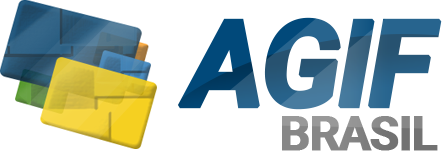
<style>
.page{position:relative;width:442px;height:151px;background:#ffffff}
.page>*{position:absolute;margin:0}
.t1{font:48.1px/44.2px "Roboto-Bold";letter-spacing:-0.05em;font-weight:bold}
.t2{font:119.8px/69.5px "Roboto-BoldItalic";letter-spacing:-0.05em;font-weight:bold}
</style>
<div class="page">
<p class="t1" style="left:177px;top:17px;width:265px;height:134px;text-align:center"><span class="t2">AGIF<br></span>BRASIL</p>
</div>
